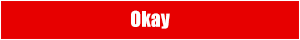
<style>
.page{position:relative;width:300px;height:40px;background:#e70000}
.page>*{position:absolute;margin:0}
.t1{font:20px "Impact";color:#fefffe}
</style>
<div class="page">
<p class="t1" style="left:131px;top:10px;width:39px;height:19px">Okay</p>
</div>
